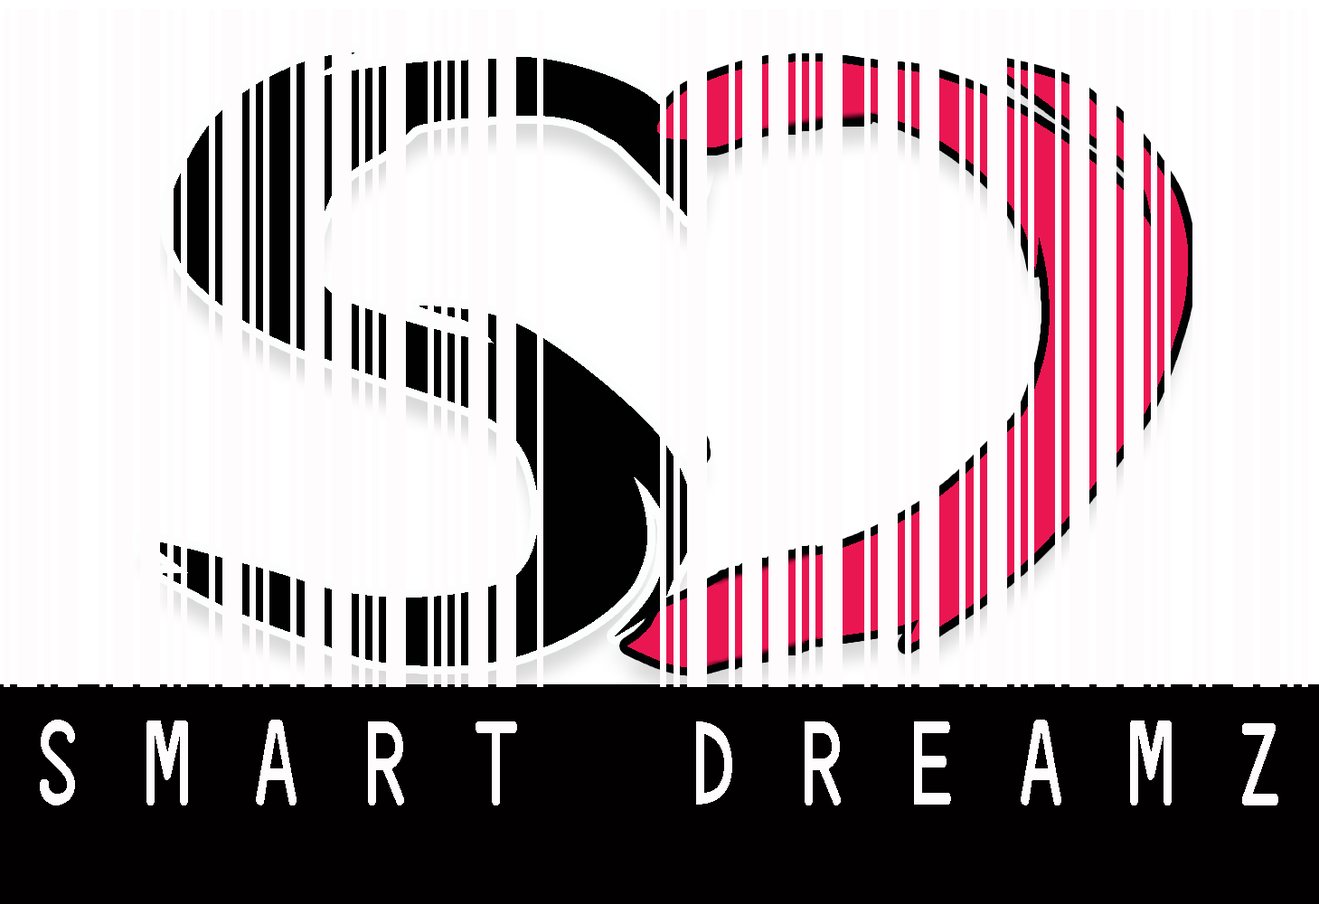
<style>
.page{position:relative;width:1319px;height:904px;background:#fefcfd}
.page>*{position:absolute;margin:0}
.t1{font:221.6px "IDAutomationHC39M";color:#fefcfd;scale:0.51 1}
.t2{font:795.9px "Horobi-Regular";color:#010101;scale:1.23 1}
</style>
<div class="page">
<p class="t1" style="left:4px;top:9px;width:1304px;height:797px;text-align:center">SMART DREAMZ</p>
<p class="t2" style="left:142px;top:52px;width:565px;height:614px">S</p>
</div>
